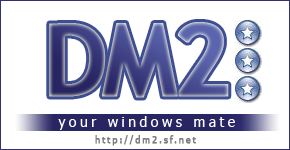
<style>
.page{position:relative;width:290px;height:150px;background:#ffffff}
.page>*{position:absolute;margin:0}
.t1{font:100px "TrebuchetMS-Bold";letter-spacing:-0.075em;font-weight:bold}
.t2{font:14px "Tahoma";letter-spacing:0.25em;color:#ffffff}
.t3{font:9px "Tahoma";letter-spacing:0.2em;color:#7d7d7d;font-weight:bold}
</style>
<div class="page">
<p class="t1" style="left:49px;top:22px;width:180px;height:76px">DM2</p>
<p class="t2" style="left:58px;top:116px;width:177px;height:14px">your windows mate</p>
<p class="t3" style="left:95px;top:135px;width:101px;height:11px">http://dm2.sf.net</p>
</div>
